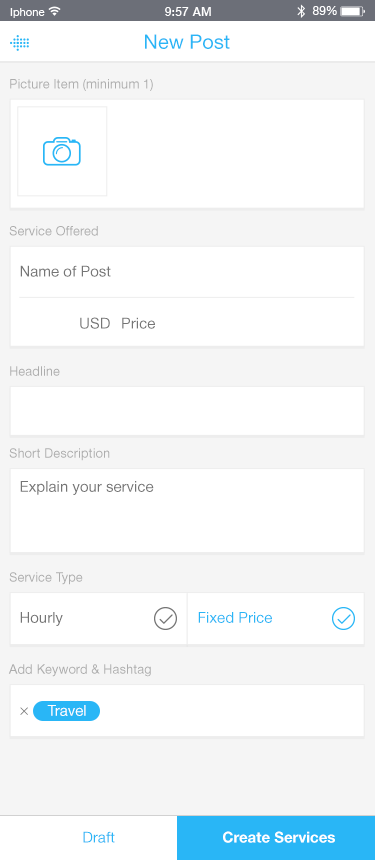
<style>
.page{position:relative;width:375px;height:860px;background:#ffffff}
.page>*{position:absolute;margin:0}
.t1{font:20px "HelveticaNeueCyr-Roman";color:#29b6f6}
.t2{font:13px "HelveticaNeueCyr-Roman";color:#adadad}
.t3{font:15px "HelveticaNeueCyr-Roman";color:#757575}
.t4{font:15px "HelveticaNeueCyr-Roman";color:#29b6f6}
.t5{font:15px "HelveticaNeueCyr-Roman";color:#fffefe}
.t6{font:15px "HelveticaNeueCyr-Bold";color:#ffffff}
</style>
<div class="page">
<p class="t1" style="left:145px;top:34px;width:85px;height:15px">New Post</p>
<p class="t2" style="left:10px;top:79px;width:143px;height:12px">Picture Item (minimum 1)</p>
<p class="t2" style="left:9px;top:226px;width:89px;height:10px">Service Offered</p>
<p class="t3" style="left:20px;top:265px;width:91px;height:12px">Name of Post</p>
<p class="t3" style="left:80px;top:317px;width:30px;height:12px">USD</p>
<p class="t3" style="left:122px;top:317px;width:33px;height:12px">Price</p>
<p class="t2" style="left:10px;top:366px;width:50px;height:10px">Headline</p>
<p class="t2" style="left:9px;top:448px;width:101px;height:13px">Short Description</p>
<p class="t3" style="left:20px;top:481px;width:134px;height:14px">Explain your service</p>
<p class="t2" style="left:9px;top:572px;width:74px;height:13px">Service Type</p>
<p class="t3" style="left:20px;top:612px;width:43px;height:14px">Hourly</p>
<p class="t4" style="left:198px;top:612px;width:74px;height:11px">Fixed Price</p>
<p class="t2" style="left:8px;top:664px;width:143px;height:13px">Add Keyword &amp; Hashtag</p>
<p class="t5" style="left:47px;top:705px;width:39px;height:11px">Travel</p>
<p class="t4" style="left:83px;top:831px;width:32px;height:12px">Draft</p>
<p class="t6" style="left:223px;top:831px;width:112px;height:12px">Create Services</p>
</div>
